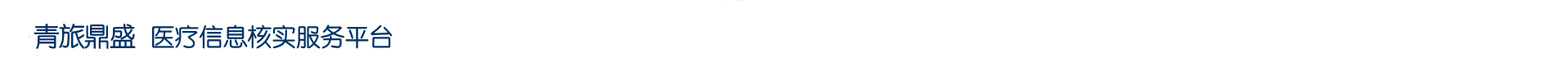
<style>
.page{position:relative;width:1568px;height:71px;background:#ffffff}
.page>*{position:absolute;margin:0}
.t1{font:24.5px "STYuanti-SC-Regular";letter-spacing:-0.01em;color:#003366}
</style>
<div class="page">
<p class="t1" style="left:152px;top:25px;width:241px;height:24px">医疗信息核实服务平台</p>
</div>
